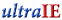
<style>
.page{position:relative;width:62px;height:20px;background:#ffffff}
.page>*{position:absolute;margin:0}
.t1{font:20px "MinionPro-SemiboldIt"}
.t2{font:20px "MinionPro-Bold"}
</style>
<div class="page">
<p class="t1" style="left:2px;top:3px;width:59px;height:15px">ultra<span class="t2">IE</span></p>
</div>
